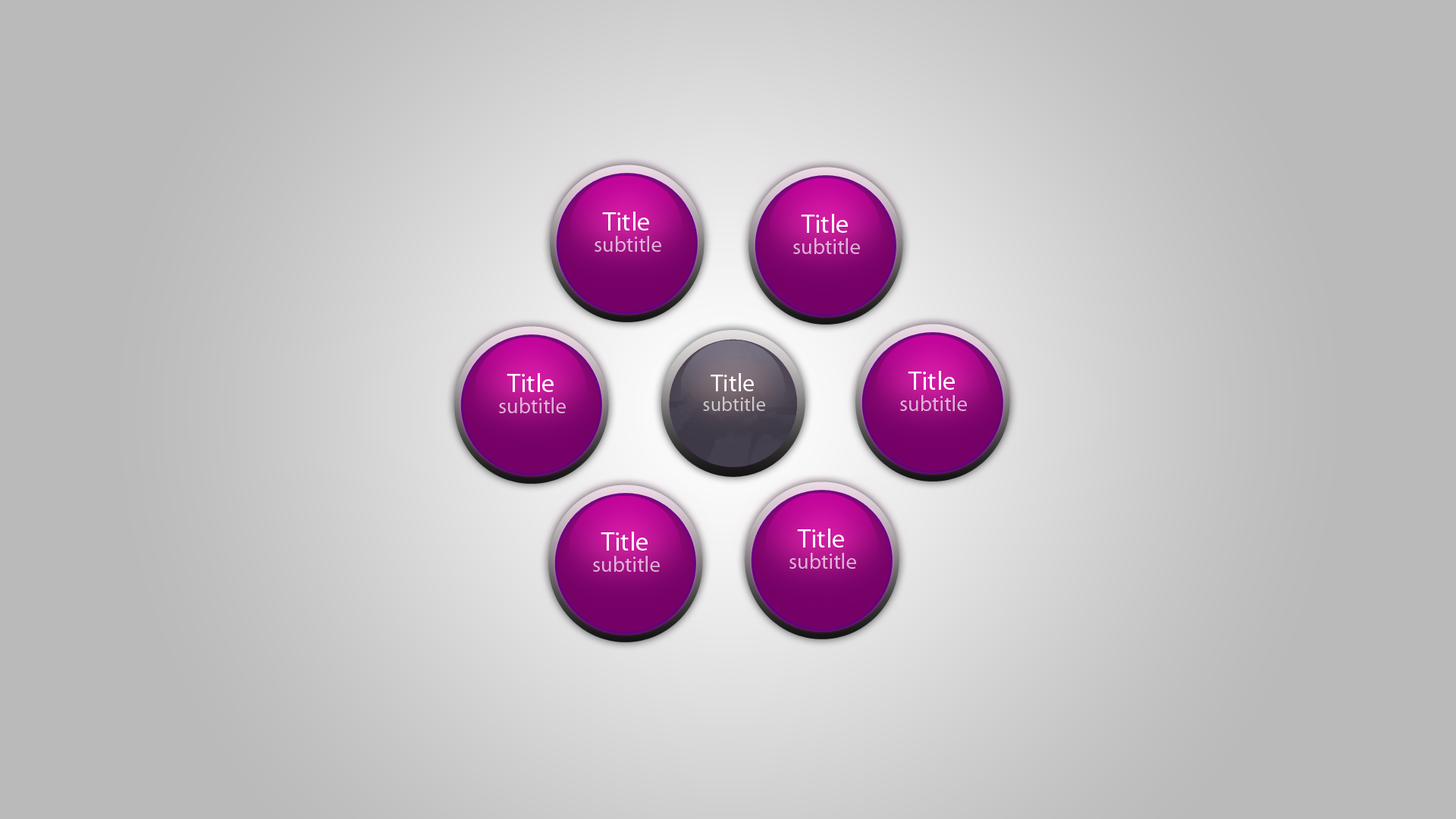
<style>
.page{position:relative;width:1456px;height:819px;background:#bababa}
.page>*{position:absolute;margin:0}
.t1{font:26.5px "MyriadPro-Regular";color:#fefefe}
.t2{font:21.6px "MyriadPro-Regular";color:#e0b2d6}
.t3{font:24.8px "MyriadPro-Regular";color:#fefefe}
.t4{font:20.2px "MyriadPro-Regular";color:#cbc8cb}
</style>
<div class="page">
<p class="t1" style="left:602px;top:212px;width:47px;height:19px">Title</p>
<p class="t1" style="left:801px;top:214px;width:47px;height:19px">Title</p>
<p class="t2" style="left:595px;top:236px;width:66px;height:16px">subtitle</p>
<p class="t2" style="left:793px;top:238px;width:67px;height:16px">subtitle</p>
<p class="t1" style="left:507px;top:373px;width:47px;height:19px">Title</p>
<p class="t3" style="left:711px;top:373px;width:43px;height:18px">Title</p>
<p class="t1" style="left:908px;top:371px;width:47px;height:19px">Title</p>
<p class="t2" style="left:499px;top:397px;width:67px;height:16px">subtitle</p>
<p class="t4" style="left:703px;top:397px;width:62px;height:14px">subtitle</p>
<p class="t2" style="left:900px;top:395px;width:67px;height:16px">subtitle</p>
<p class="t1" style="left:601px;top:532px;width:47px;height:19px">Title</p>
<p class="t1" style="left:797px;top:529px;width:47px;height:19px">Title</p>
<p class="t2" style="left:593px;top:556px;width:67px;height:16px">subtitle</p>
<p class="t2" style="left:789px;top:553px;width:67px;height:16px">subtitle</p>
</div>
